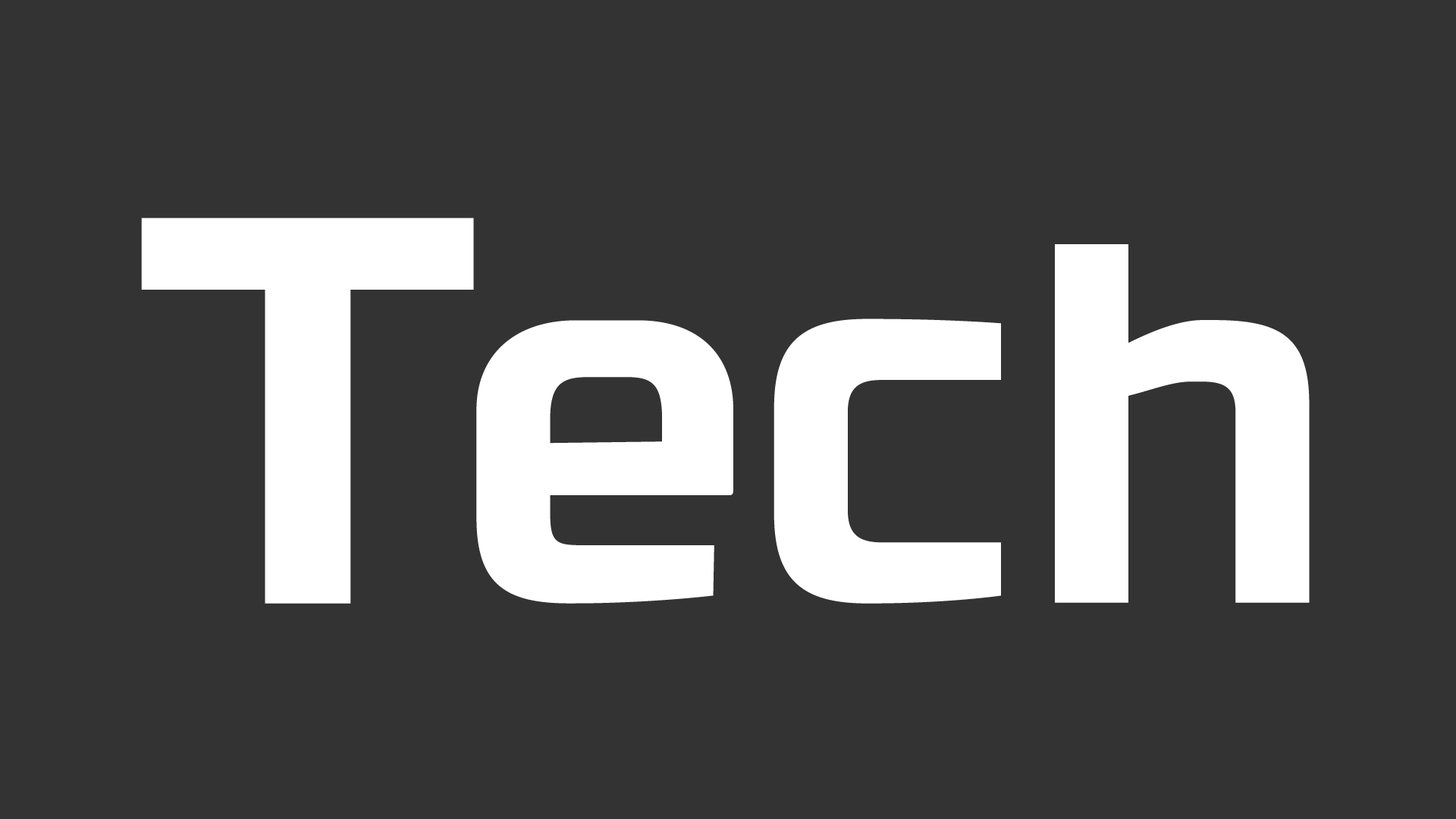
<style>
.page{position:relative;width:1456px;height:819px;background:#333333}
.page>*{position:absolute;margin:0}
.t1{font:550.4px "RBNo3.1-Bold";letter-spacing:-0.05em;color:#ffffff;text-transform:uppercase}
.t2{font:486.8px "RBNo3.1-Bold";letter-spacing:-0.05em;color:#ffffff}
</style>
<div class="page">
<p class="t1" style="left:141px;top:218px;width:333px;height:386px">t</p>
<p class="t2" style="left:1055px;top:244px;width:255px;height:359px">h</p>
<p class="t2" style="left:476px;top:320px;width:257px;height:284px">e</p>
<p class="t2" style="left:773px;top:318px;width:228px;height:286px">c</p>
</div>
